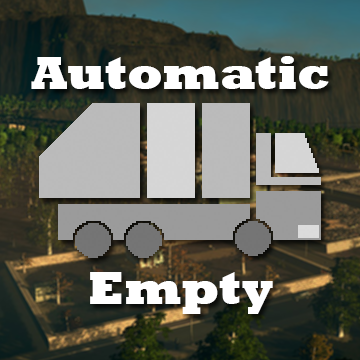
<style>
.page{position:relative;width:360px;height:360px}
.page>*{position:absolute;margin:0}
.t1{font:48px/5px "Rockwell-ExtraBold";letter-spacing:-0.005em;color:#ffffff}
</style>
<div class="page">
<p class="t1" style="left:31px;top:56px;width:298px;height:258px;text-align:center">Automatic<br><br><br><br><br><br><br><br><br><br><br><br><br><br><br><br><br><br><br><br><br><br><br><br><br><br><br><br><br><br><br><br><br><br><br><br><br><br><br><br><br><br><br>Empty</p>
</div>
